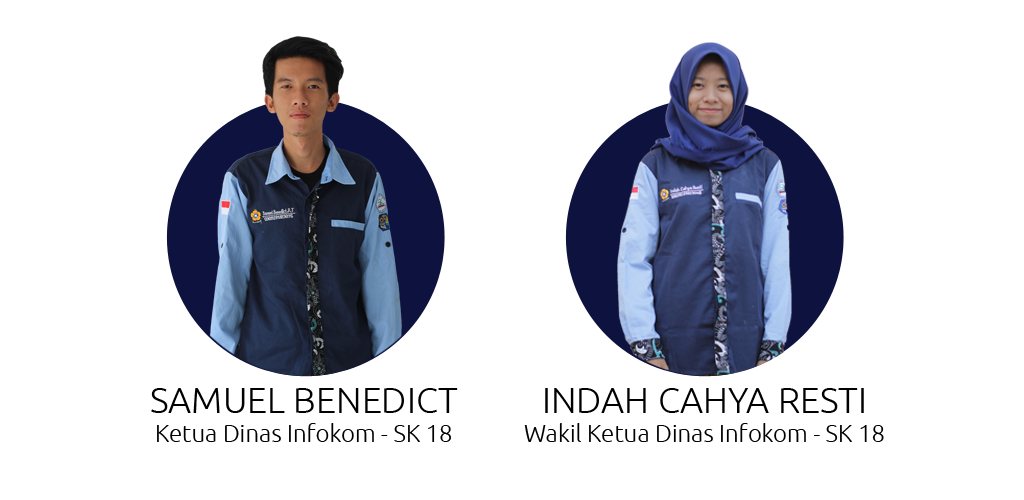
<style>
.page{position:relative;width:1024px;height:500px;background:#ffffff}
.page>*{position:absolute;margin:0}
.t1{font:24px "Ubuntu-Light";color:#000000}
.t2{font:36px "Ubuntu-Light";color:#000000}
</style>
<div class="page">
<p class="t1" style="left:151px;top:388px;width:307px;height:54px;text-align:center"><span class="t2">SAMUEL BENEDICT<br></span>Ketua Dinas Infokom - SK 18</p>
<p class="t1" style="left:524px;top:388px;width:360px;height:54px;text-align:center"><span class="t2">INDAH CAHYA RESTI<br></span>Wakil Ketua Dinas Infokom - SK 18</p>
</div>
